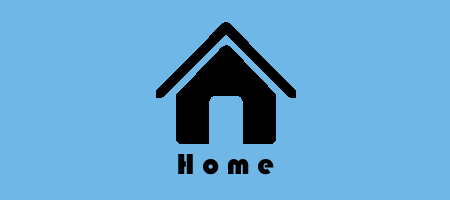
<style>
.page{position:relative;width:450px;height:200px;background:#6eb7e6}
.page>*{position:absolute;margin:0}
.t1{font:30px "Bauhaus93";color:#000000}
</style>
<div class="page">
<p class="t1" style="left:178px;top:154px;width:96px;height:21px">H o m e</p>
</div>
